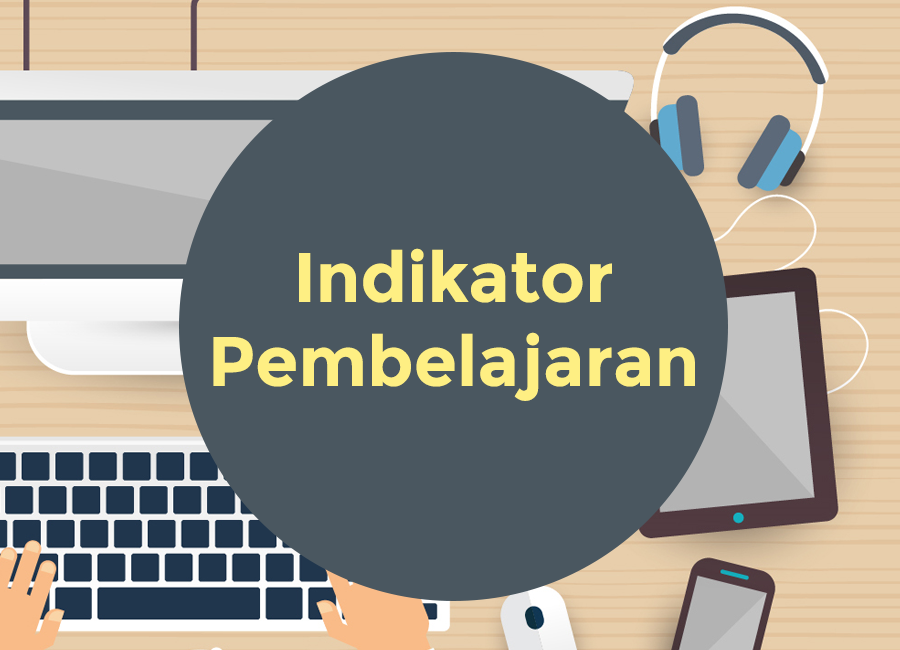
<style>
.page{position:relative;width:900px;height:650px;background:#4a5760}
.page>*{position:absolute;margin:0}
.t1{font:70px "Montserrat-Bold";color:#feef83}
</style>
<div class="page">
<p class="t1" style="left:213px;top:248px;width:482px;height:153px;text-align:center">Indikator<br>Pembelajaran</p>
</div>
